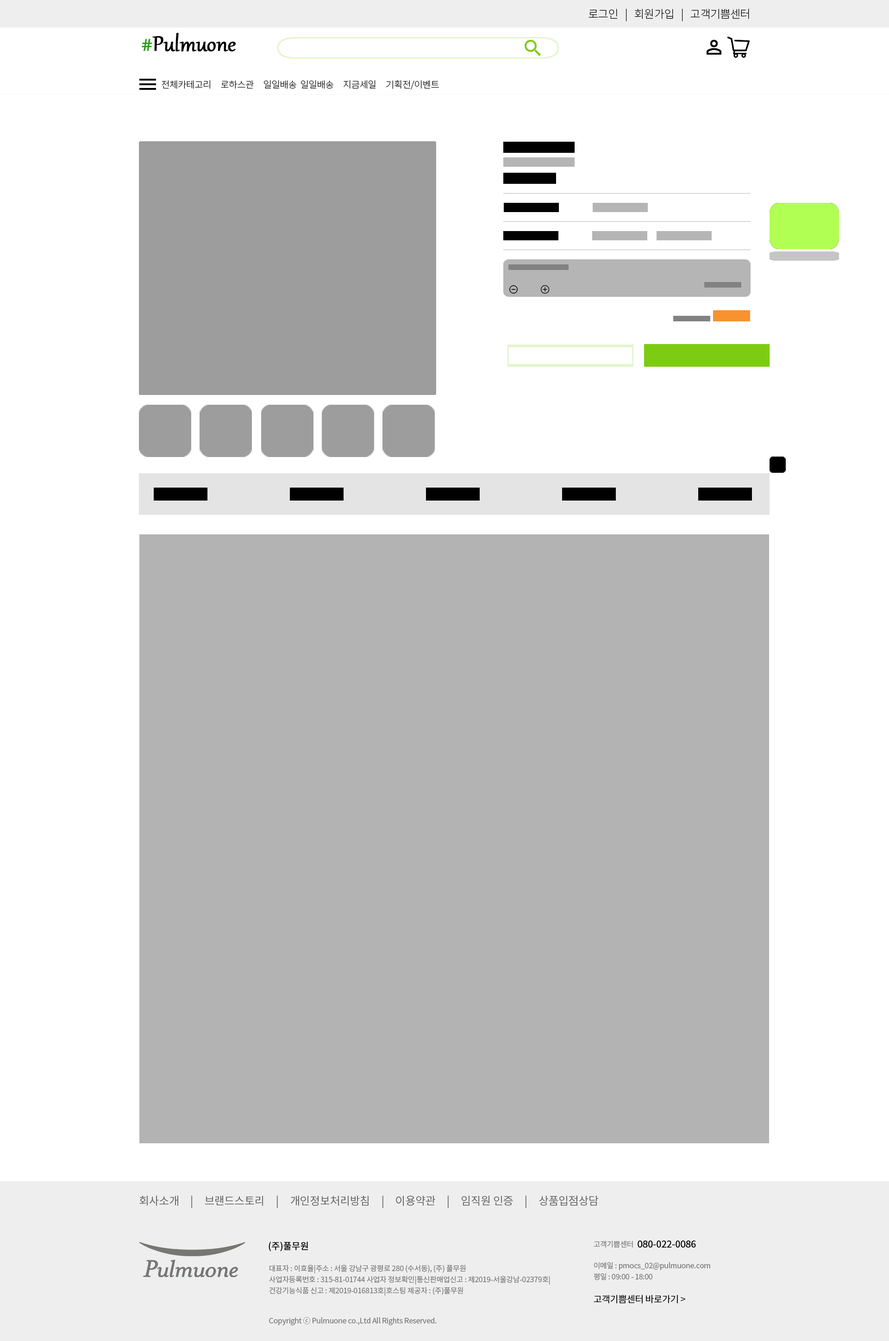
<style>
.page{position:relative;width:889px;height:1341px;background:#ffffff}
.page>*{position:absolute;margin:0}
.t1{font:11.1px "NotoSansCJKkr-Light";letter-spacing:-0.02em;color:#000000}
.t2{font:25.9px "Gabriola";letter-spacing:-0.02em;color:#000000;font-weight:bold}
.t3{font:25.9px "Gabriola";letter-spacing:-0.02em;color:#339e23;font-weight:bold}
.t4{font:9.3px "NotoSansCJKkr-Light";letter-spacing:-0.02em;color:#000000}
.t5{font:11.1px "NotoSansCJKkr-Regular";letter-spacing:-0.02em;color:#616161}
.t6{font:7.4px "NotoSansCJKkr-Regular";letter-spacing:-0.02em;color:#767676}
.t7{font:9.3px "NotoSansCJKkr-Regular";letter-spacing:-0.02em;color:#000000;font-weight:bold}
.t8{font:7.4px/11.1px "NotoSansCJKkr-Regular";letter-spacing:-0.02em;color:#767676}
.t9{font:9.3px "NotoSansCJKkr-Regular";letter-spacing:-0.02em;color:#000000}
</style>
<div class="page">
<p class="t1" style="left:589px;top:9px;width:160px;height:12px">로그인   |   회원가입   |   고객기쁨센터</p>
<p class="t2" style="left:142px;top:33px;width:94px;height:18px"><span class="t3">#</span>Pulmuone</p>
<p class="t4" style="left:162px;top:80px;width:277px;height:10px">전체카테고리     로하스관     일일배송  일일배송     지금세일     기획전/이벤트</p>
<p class="t5" style="left:139px;top:1196px;width:459px;height:12px">회사소개     |     브랜드스토리     |     개인정보처리방침     |     이용약관     |     임직원 인증     |     상품입점상담</p>
<p class="t6" style="left:594px;top:1241px;width:39px;height:7px">고객기쁨센터</p>
<p class="t7" style="left:638px;top:1241px;width:58px;height:7px">080-022-0086</p>
<p class="t8" style="left:269px;top:1265px;width:281px;height:31px">대표자 : 이효율|주소 : 서울 강남구 광평로 280 (수서동), (주) 풀무원<br>사업자등록번호 : 315-81-01744 사업자 정보확인|통신판매업신고 : 제2019-서울강남-02379호|<br>건강기능식품 신고 : 제2019-016813호|호스팅 제공자 : (주)풀무원</p>
<p class="t8" style="left:594px;top:1262px;width:116px;height:18px">이메일 : pmocs_02@pulmuone.com평일 : 09:00 - 18:00</p>
<p class="t9" style="left:594px;top:1295px;width:91px;height:9px">고객기쁨센터 바로가기 &gt;</p>
<p class="t6" style="left:269px;top:1317px;width:168px;height:8px">Copyright ⓒ Pulmuone co.,Ltd All Rights Reserved.</p>
</div>
